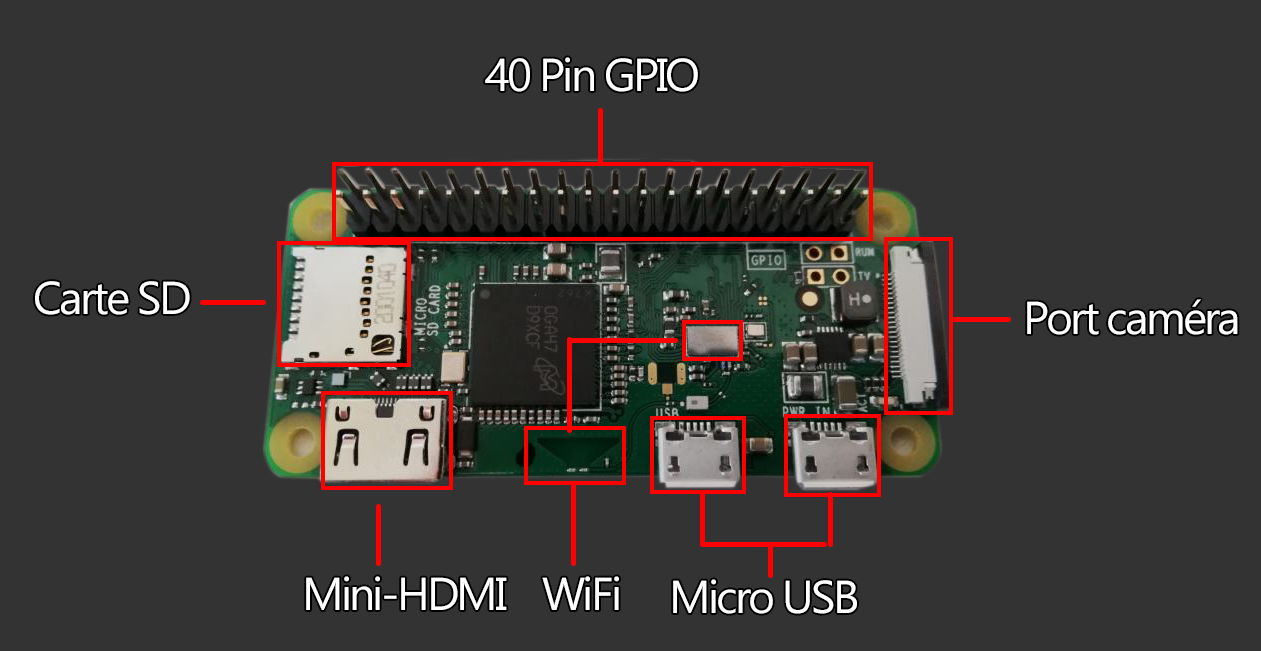
<style>
.page{position:relative;width:1261px;height:651px;background:#333333}
.page>*{position:absolute;margin:0}
.t1{font:46px "Gadugi";letter-spacing:-0.06em;color:#ffffff}
</style>
<div class="page">
<p class="t1" style="left:485px;top:57px;width:213px;height:35px">40 Pin GPIO</p>
<p class="t1" style="left:35px;top:281px;width:155px;height:34px">Carte SD</p>
<p class="t1" style="left:1027px;top:299px;width:211px;height:36px">Port caméra</p>
<p class="t1" style="left:306px;top:576px;width:201px;height:34px">Mini-HDMI</p>
<p class="t1" style="left:542px;top:576px;width:77px;height:34px">WiFi</p>
<p class="t1" style="left:673px;top:579px;width:184px;height:35px">Micro USB</p>
</div>
